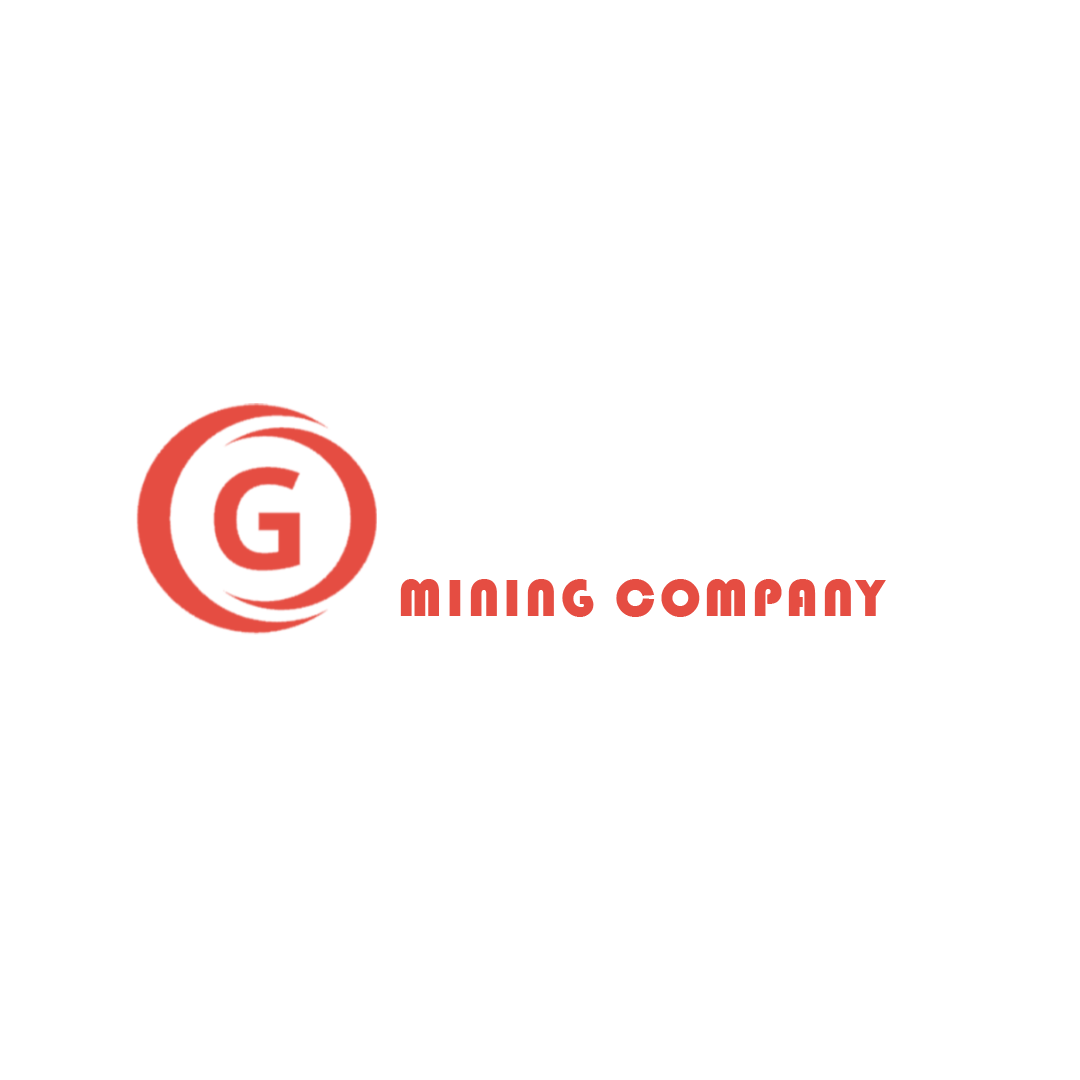
<style>
.page{position:relative;width:1080px;height:1080px;background:#ffffff}
.page>*{position:absolute;margin:0}
.t1{font:53.7px "Bauhaus93";letter-spacing:0.075em;color:#e54d42;text-transform:uppercase}
</style>
<div class="page">
<p class="t1" style="left:400px;top:579px;width:486px;height:38px">mining company</p>
</div>
